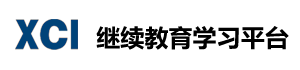
<style>
.page{position:relative;width:300px;height:70px;background:#ffffff}
.page>*{position:absolute;margin:0}
.t1{font:24px "MicrosoftYaHei-Bold";color:#000000}
</style>
<div class="page">
<p class="t1" style="left:96px;top:26px;width:193px;height:24px">继续教育学习平台</p>
</div>
